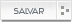
<style>
.page{position:relative;width:72px;height:22px}
.page>*{position:absolute;margin:0}
.t1{font:9px "Stentiga-Regular";color:#6c737a}
</style>
<div class="page">
<p class="t1" style="left:14px;top:7px;width:30px;height:8px">salvar</p>
</div>
